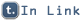
<style>
.page{position:relative;width:81px;height:20px;background:#ffffff}
.page>*{position:absolute;margin:0}
.t1{font:11.6px "OCRAStd";color:#45607f;font-weight:bold}
</style>
<div class="page">
<p class="t1" style="left:21px;top:5px;width:59px;height:10px">In Link</p>
</div>
